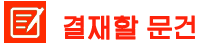
<style>
.page{position:relative;width:224px;height:44px;background:#ffffff}
.page>*{position:absolute;margin:0}
.t1{font:25px "PIC-Gothic-Medium-KP-97KPS";color:#fe220b;font-weight:bold}
</style>
<div class="page">
<p class="t1" style="left:63px;top:15px;width:132px;height:25px">결재할 문건</p>
</div>
